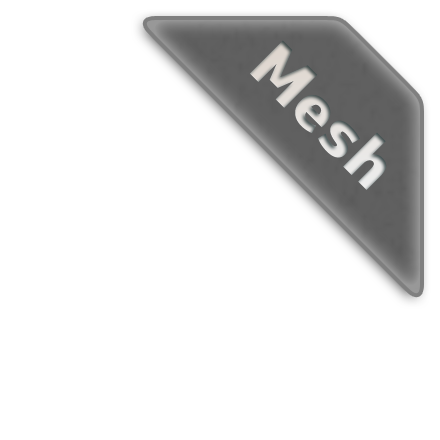
<style>
.page{position:relative;width:440px;height:440px;background:#ffffff}
.page>*{position:absolute;margin:0}
.t1{font:64px "mplus-1p-black"}
</style>
<div class="page">
<p class="t1" style="left:250px;top:40px;width:137px;height:150px;rotate:45deg">Mesh</p>
</div>
